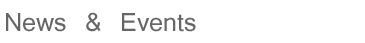
<style>
.page{position:relative;width:365px;height:43px;background:#ffffff}
.page>*{position:absolute;margin:0}
.t1{font:40px "Kartika";color:#666666}
</style>
<div class="page">
<p class="t1" style="left:6px;top:12px;width:190px;height:20px">News &amp; Events</p>
</div>
